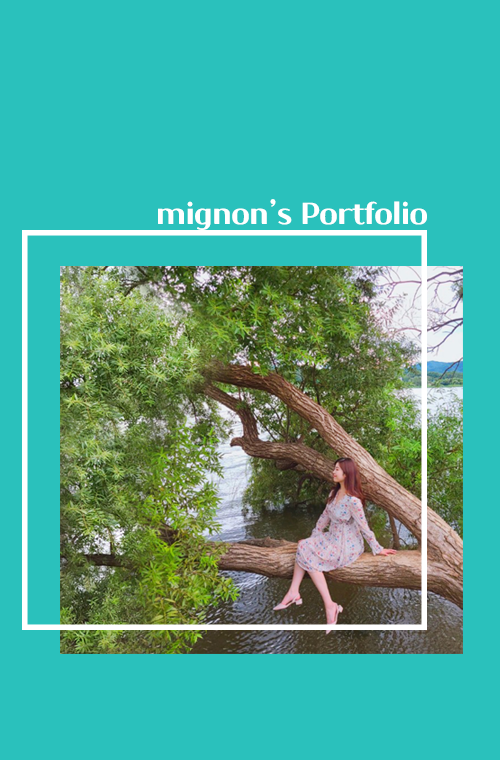
<style>
.page{position:relative;width:500px;height:760px;background:#2ac1bc}
.page>*{position:absolute;margin:0}
.t1{font:30px "Cafe24Dangdanghae";color:#ffffff}
</style>
<div class="page">
<p class="t1" style="left:158px;top:199px;width:269px;height:31px">mignon’s Portfolio</p>
</div>
